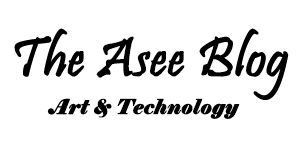
<style>
.page{position:relative;width:300px;height:150px;background:#ffffff}
.page>*{position:absolute;margin:0}
.t1{font:56px "Pristina-Regular";letter-spacing:0.001em;color:#000000;font-weight:bold}
.t2{font:20px "Elephant-Italic";letter-spacing:0.001em;color:#000000;font-weight:bold}
</style>
<div class="page">
<p class="t1" style="left:14px;top:28px;width:275px;height:72px">The Asee Blog</p>
<p class="t2" style="left:47px;top:98px;width:193px;height:21px">Art &amp; Technology</p>
</div>
